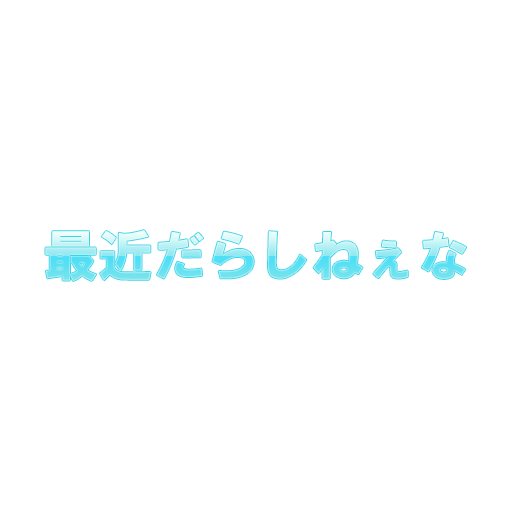
<style>
.page{position:relative;width:512px;height:512px;background:#ffffff}
.page>*{position:absolute;margin:0}
.t1{font:55.6px "HGSoeiKakugothicUB"}
</style>
<div class="page">
<p class="t1" style="left:45px;top:230px;width:422px;height:51px">最近だらしねぇな</p>
</div>
